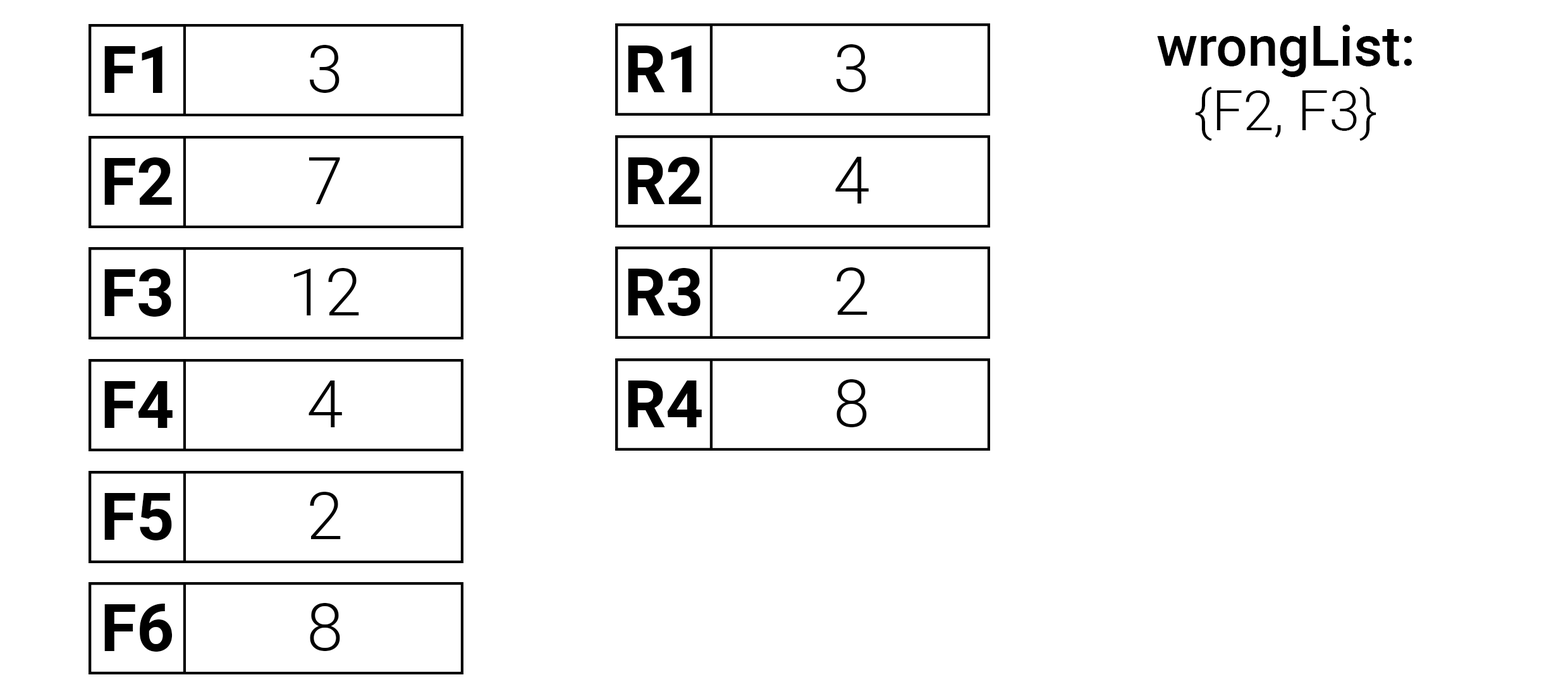
<style>
.page{position:relative;width:1568px;height:694px;background:#ffffff}
.page>*{position:absolute;margin:0}
.t1{font:55.3px "Roboto-Medium";color:#000000}
.t2{font:65.9px "Roboto-Bold";color:#000000}
.t3{font:65.9px "Roboto-Light";color:#000000}
.t4{font:55.3px "Roboto-Light";color:#000000}
</style>
<div class="page">
<p class="t1" style="left:1157px;top:25px;width:255px;height:52px">wrongList:</p>
<p class="t2" style="left:104px;top:46px;width:58px;height:47px">F1</p>
<p class="t3" style="left:309px;top:45px;width:31px;height:48px">3</p>
<p class="t2" style="left:628px;top:46px;width:64px;height:46px">R1</p>
<p class="t3" style="left:836px;top:44px;width:30px;height:48px">3</p>
<p class="t4" style="left:1195px;top:87px;width:181px;height:54px">{F2, F3}</p>
<p class="t2" style="left:104px;top:157px;width:68px;height:48px">F2</p>
<p class="t3" style="left:309px;top:157px;width:31px;height:47px">7</p>
<p class="t2" style="left:628px;top:157px;width:73px;height:47px">R2</p>
<p class="t3" style="left:835px;top:157px;width:34px;height:47px">4</p>
<p class="t2" style="left:104px;top:269px;width:67px;height:48px">F3</p>
<p class="t3" style="left:294px;top:268px;width:65px;height:47px">12</p>
<p class="t2" style="left:628px;top:268px;width:73px;height:48px">R3</p>
<p class="t3" style="left:836px;top:267px;width:31px;height:48px">2</p>
<p class="t2" style="left:104px;top:381px;width:69px;height:47px">F4</p>
<p class="t3" style="left:309px;top:381px;width:33px;height:46px">4</p>
<p class="t2" style="left:628px;top:381px;width:74px;height:46px">R4</p>
<p class="t3" style="left:836px;top:379px;width:31px;height:48px">8</p>
<p class="t2" style="left:104px;top:493px;width:68px;height:48px">F5</p>
<p class="t3" style="left:310px;top:492px;width:31px;height:47px">2</p>
<p class="t2" style="left:104px;top:604px;width:69px;height:48px">F6</p>
<p class="t3" style="left:310px;top:603px;width:30px;height:48px">8</p>
</div>
